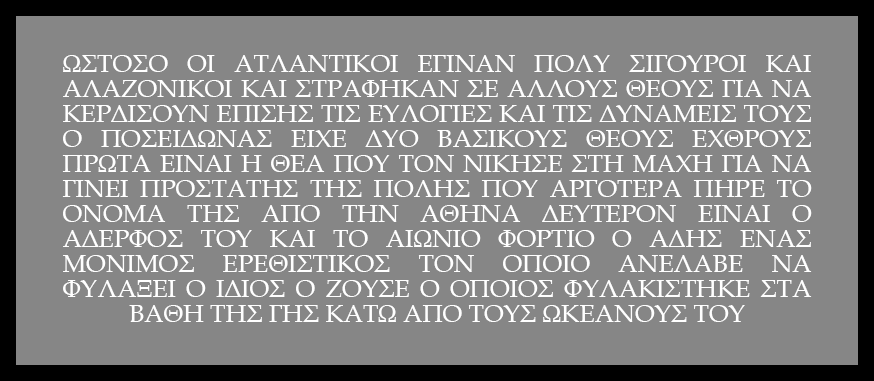
<style>
.page{position:relative;width:874px;height:381px;background:#868686}
.page>*{position:absolute;margin:0}
.t1{font:25px/25px "BookAntiqua";color:#ffffff;text-transform:uppercase}
</style>
<div class="page">
<p class="t1" style="left:62px;top:55px;width:750px;height:267px;text-align:justify">Ωστόσο οι Ατλαντικοί έγιναν πολύ σίγουροι και αλαζονικοί και στράφηκαν σε άλλους θεούς για να κερδίσουν επίσης τις ευλογίες και τις δυνάμεις τους Ο Ποσειδώνας είχε δύο βασικούς θεούς εχθρούς Πρώτα είναι η θεά που τον νίκησε στη μάχη για να γίνει προστάτης της πόλης που αργότερα πήρε το όνομά της από την Αθηνά Δεύτερον είναι ο αδερφός του και το αιώνιο φορτίο ο Άδης ένας μόνιμος ερεθιστικός τον οποίο ανέλαβε να φυλάξει ο ίδιος ο Ζούσε ο οποίος φυλακίστηκε στα βάθη της γης κάτω από τους ωκεανούς του</p>
</div>
